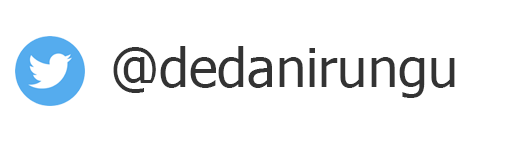
<style>
.page{position:relative;width:512px;height:150px;background:#ffffff}
.page>*{position:absolute;margin:0}
.t1{font:54px "Tahoma";color:#333333}
</style>
<div class="page">
<p class="t1" style="left:113px;top:46px;width:342px;height:52px">@dedanirungu</p>
</div>
